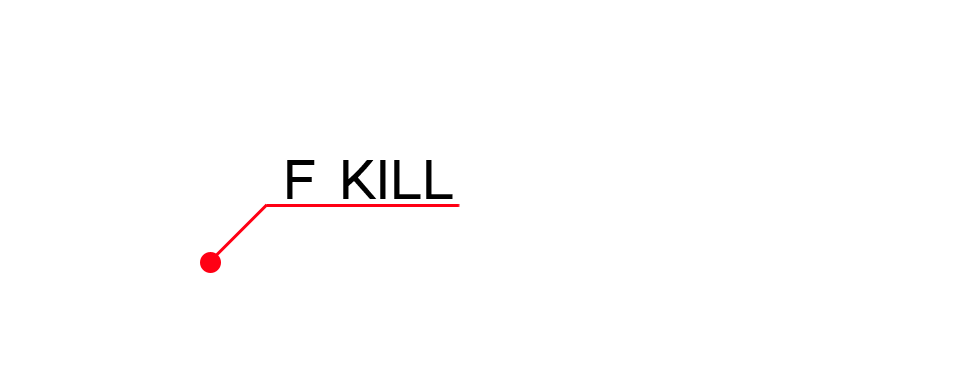
<style>
.page{position:relative;width:966px;height:380px;background:#ffffff}
.page>*{position:absolute;margin:0}
.t1{font:57.3px "HaanYGodic23";letter-spacing:-0.065em;color:#000000}
</style>
<div class="page">
<p class="t1" style="left:287px;top:160px;width:28px;height:39px">F</p>
<p class="t1" style="left:343px;top:160px;width:110px;height:39px">KILL</p>
</div>
